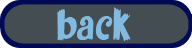
<style>
.page{position:relative;width:192px;height:48px;background:#444d52}
.page>*{position:absolute;margin:0}
.t1{font:89.6px "FantasticFont";color:#81bbe0}
</style>
<div class="page">
<p class="t1" style="left:57px;top:7px;width:74px;height:34px">back</p>
</div>
